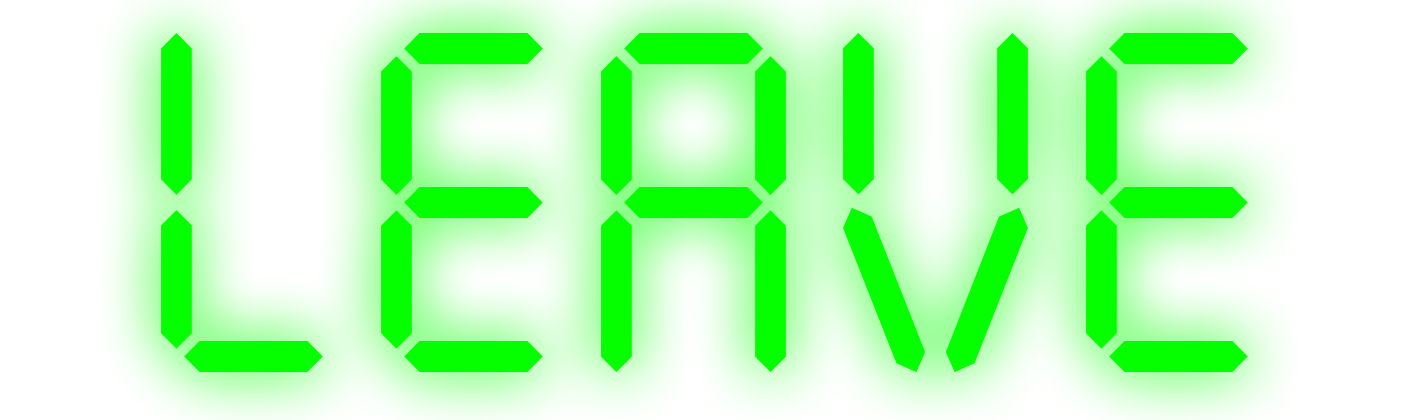
<style>
.page{position:relative;width:1410px;height:420px}
.page>*{position:absolute;margin:0}
.t1{font:483.7px "SevenSegmentRegular";color:#06ff00}
</style>
<div class="page">
<p class="t1" style="left:161px;top:33px;width:1087px;height:339px">lEAVE</p>
</div>
